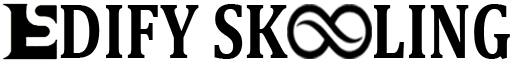
<style>
.page{position:relative;width:512px;height:64px;background:#ffffff}
.page>*{position:absolute;margin:0}
.t1{font:79.5px "Cambria-Bold";color:#000000;scale:0.8 1}
</style>
<div class="page">
<p class="t1" style="left:60px;top:4px;width:450px;height:55px">DIFY SK      LING</p>
</div>
